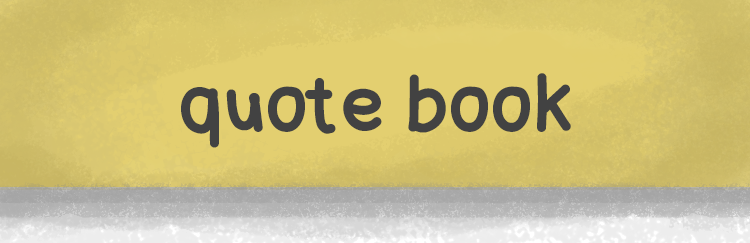
<style>
.page{position:relative;width:750px;height:243px}
.page>*{position:absolute;margin:0}
.t1{font:70px "Lettregaelle";color:#424242}
</style>
<div class="page">
<p class="t1" style="left:181px;top:73px;width:390px;height:75px">quote book</p>
</div>
